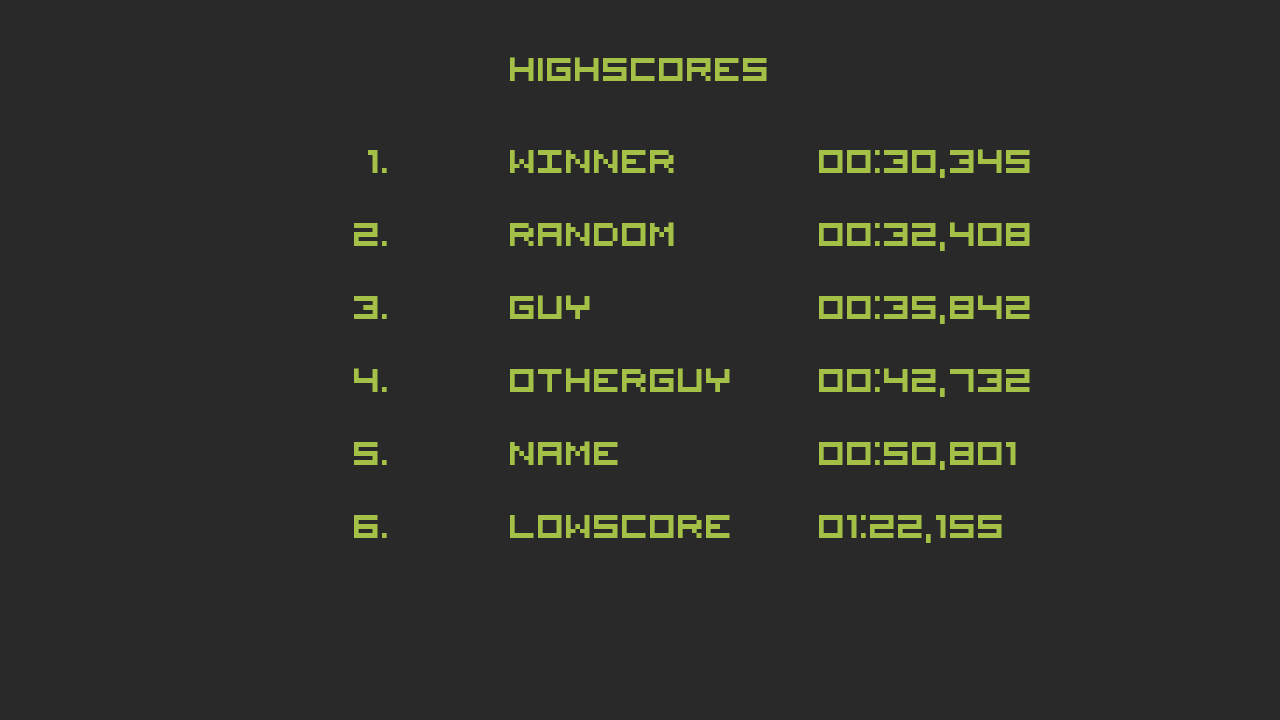
<style>
.page{position:relative;width:1280px;height:720px;background:#292929}
.page>*{position:absolute;margin:0}
.t1{font:60px "VisitorTT2BRK";color:#a5c046}
.t2{font:60px "VisitorTT2BRK";color:#a5c046;text-transform:uppercase}
</style>
<div class="page">
<p class="t1" style="left:510px;top:57px;width:257px;height:24px">Highscores</p>
<p class="t1" style="left:368px;top:150px;width:19px;height:23px">1.</p>
<p class="t2" style="left:510px;top:150px;width:164px;height:23px">winner</p>
<p class="t1" style="left:819px;top:149px;width:211px;height:29px">00:30,345</p>
<p class="t2" style="left:510px;top:222px;width:164px;height:24px">random</p>
<p class="t1" style="left:819px;top:222px;width:211px;height:29px">00:32,408</p>
<p class="t1" style="left:354px;top:223px;width:33px;height:23px">2.</p>
<p class="t1" style="left:354px;top:296px;width:33px;height:23px">3.</p>
<p class="t2" style="left:510px;top:295px;width:80px;height:24px">guy</p>
<p class="t1" style="left:819px;top:295px;width:211px;height:29px">00:35,842</p>
<p class="t1" style="left:354px;top:368px;width:33px;height:24px">4.</p>
<p class="t2" style="left:510px;top:368px;width:220px;height:24px">otherguy</p>
<p class="t1" style="left:819px;top:368px;width:211px;height:29px">00:42,732</p>
<p class="t1" style="left:354px;top:442px;width:33px;height:23px">5.</p>
<p class="t2" style="left:510px;top:441px;width:108px;height:24px">name</p>
<p class="t1" style="left:819px;top:442px;width:197px;height:28px">00:50,801</p>
<p class="t1" style="left:354px;top:515px;width:33px;height:23px">6.</p>
<p class="t2" style="left:510px;top:515px;width:220px;height:23px">lowscore</p>
<p class="t1" style="left:819px;top:515px;width:183px;height:28px">01:22,155</p>
</div>
